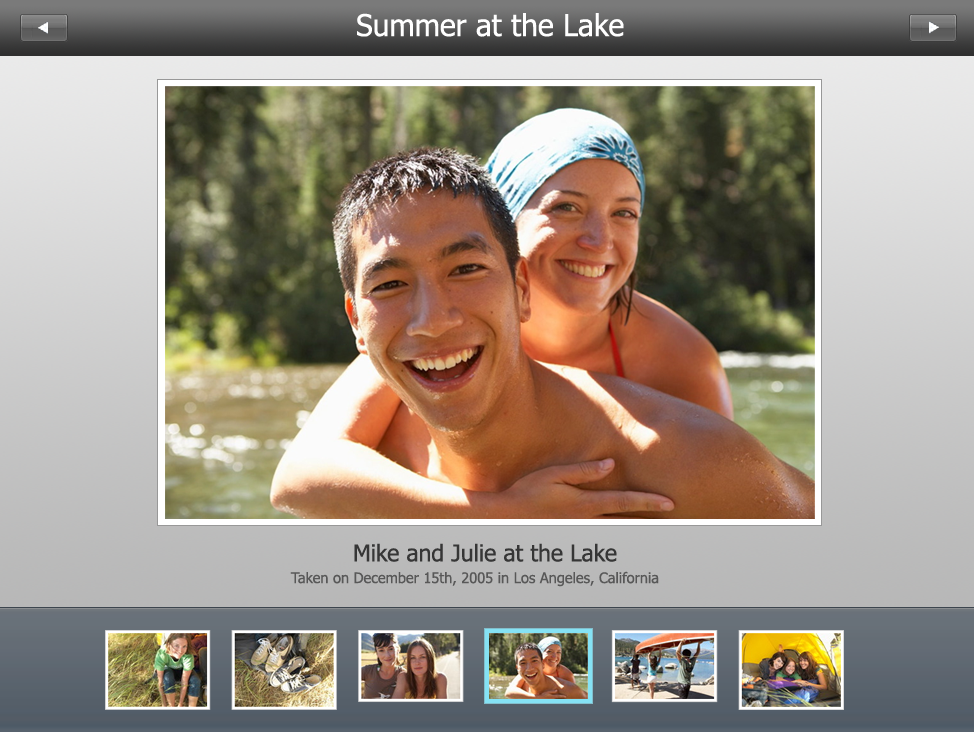
<style>
.page{position:relative;width:974px;height:732px}
.page>*{position:absolute;margin:0}
.t1{font:30px "Tahoma";color:#ffffff}
.t2{font:23px "Tahoma";color:#363636}
.t3{font:14.6px "Tahoma";color:#585858}
</style>
<div class="page">
<p class="t1" style="left:357px;top:13px;width:267px;height:24px">Summer at the Lake</p>
<p class="t2" style="left:354px;top:543px;width:263px;height:19px">Mike and Julie at the Lake</p>
<p class="t3" style="left:290px;top:571px;width:369px;height:16px">Taken on December 15th, 2005 in Los Angeles, California</p>
</div>
